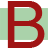
<style>
.page{position:relative;width:48px;height:48px;background:#a01414}
.page>*{position:absolute;margin:0}
.t1{font:66.5px "Helvetica";color:#a01414}
</style>
<div class="page">
<p class="t1" style="left:7px;top:1px;width:38px;height:47px">B</p>
</div>
